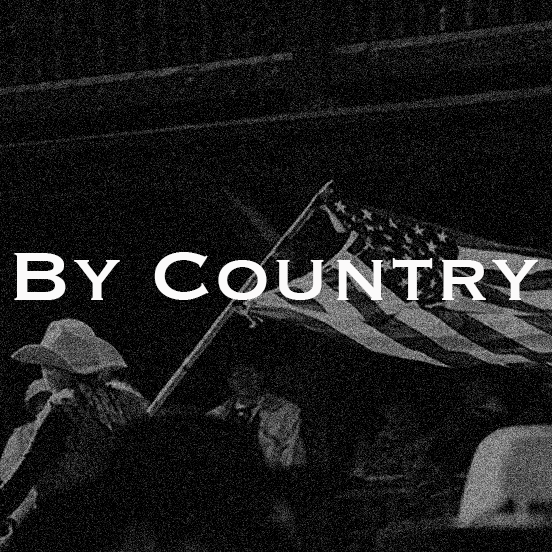
<style>
.page{position:relative;width:552px;height:552px;background:#000000}
.page>*{position:absolute;margin:0}
.t1{font:90px "Copperplate";color:#fbfafa}
</style>
<div class="page">
<p class="t1" style="left:14px;top:252px;width:524px;height:48px">By Country</p>
</div>
